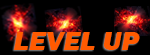
<style>
.page{position:relative;width:150px;height:55px;background:#000000}
.page>*{position:absolute;margin:0}
.t1{font:27.4px "FranklinGothic-HeavyItalic";color:#ff5a00;scale:1.06 1}
</style>
<div class="page">
<p class="t1" style="left:14px;top:32px;width:126px;height:18px">LEVEL UP</p>
</div>
